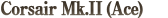
<style>
.page{position:relative;width:168px;height:18px;background:#ffffff}
.page>*{position:absolute;margin:0}
.t1{font:18px "RyuminPro-ExBold";letter-spacing:-0.06em;color:#4a3f32;font-weight:bold;scale:0.9 1}
</style>
<div class="page">
<p class="t1" style="left:1px;top:1px;width:142px;height:18px">Corsair Mk.II (Ace)</p>
</div>
